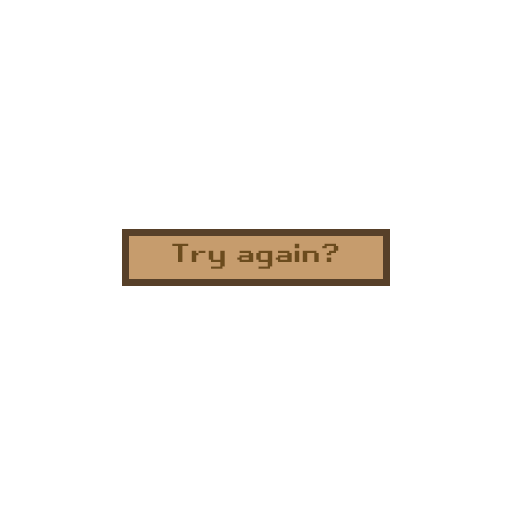
<style>
.page{position:relative;width:512px;height:512px;background:#ffffff}
.page>*{position:absolute;margin:0}
.t1{font:25px "RetroGaming";color:#6b4b1d}
</style>
<div class="page">
<p class="t1" style="left:172px;top:243px;width:167px;height:26px">Try again?</p>
</div>
